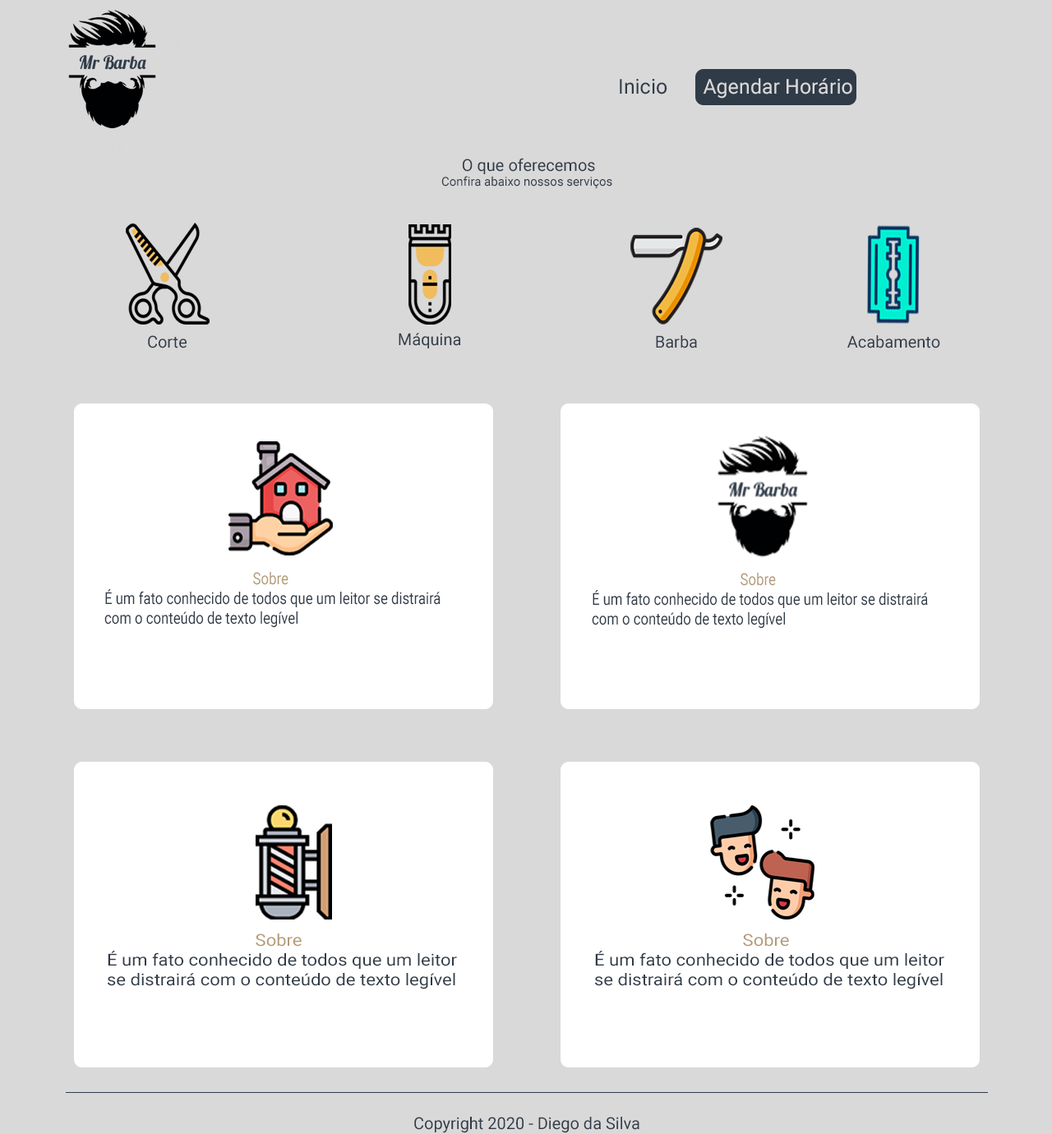
<style>
.page{position:relative;width:1052px;height:1134px;background:#d9d9d9}
.page>*{position:absolute;margin:0}
.t1{font:12.3px "Roboto-Regular";color:#303b48}
.t2{font:16.4px "Roboto-Regular";color:#303b48}
.t3{font:16.5px "Roboto-Regular";color:#303b48}
.t4{font:16.4px "Roboto-Regular";color:#303b48;scale:0.84 1}
.t5{font:16.4px "Roboto-Regular";color:#b39b78;scale:0.84 1}
.t6{font:16.4px "Roboto-Regular";color:#303b48;scale:1.1 1}
.t7{font:16.4px "Roboto-Regular";color:#b39b78;scale:1.1 1}
</style>
<div class="page">
<p class="t1" style="left:441px;top:158px;width:171px;height:31px"><span class="t2">     O que oferecemos<br></span>Confira abaixo nossos serviços</p>
<p class="t2" style="left:148px;top:335px;width:39px;height:13px">Corte</p>
<p class="t2" style="left:398px;top:333px;width:63px;height:15px">Máquina</p>
<p class="t3" style="left:656px;top:335px;width:41px;height:13px">Barba</p>
<p class="t2" style="left:847px;top:335px;width:93px;height:13px">Acabamento</p>
<p class="t4" style="left:104px;top:572px;width:336px;height:56px"><span class="t5">      Sobre<br></span>É um fato conhecido de todos que um leitor se distrairá com o conteúdo de texto legível</p>
<p class="t4" style="left:592px;top:573px;width:336px;height:56px"><span class="t5">      Sobre<br></span>É um fato conhecido de todos que um leitor se distrairá com o conteúdo de texto legível</p>
<p class="t6" style="left:108px;top:933px;width:349px;height:56px"><span class="t7">      Sobre<br></span>É um fato conhecido de todos que um leitor se distrairá com o conteúdo de texto legível</p>
<p class="t6" style="left:595px;top:933px;width:349px;height:56px"><span class="t7">      Sobre<br></span>É um fato conhecido de todos que um leitor se distrairá com o conteúdo de texto legível</p>
<p class="t2" style="left:414px;top:1117px;width:225px;height:16px">Copyright 2020 - Diego da Silva</p>
</div>
